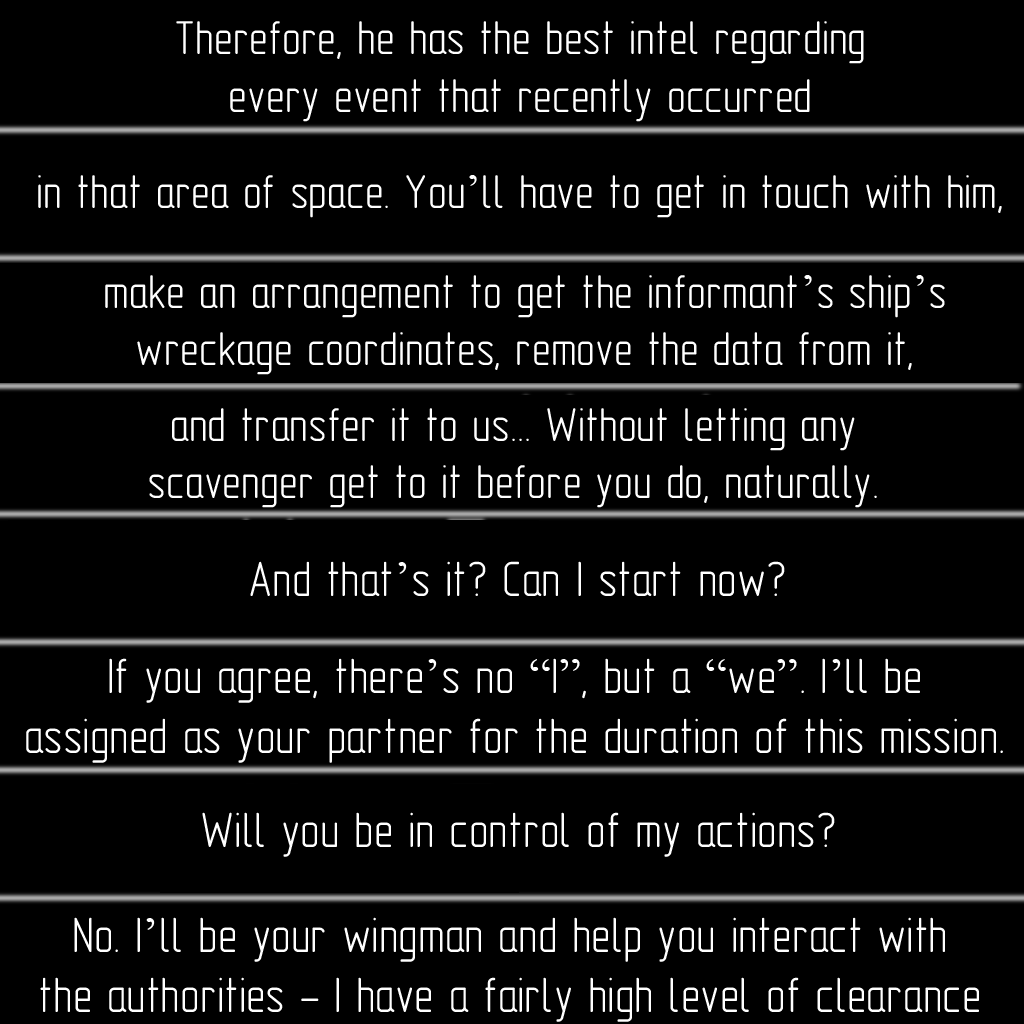
<style>
.page{position:relative;width:1024px;height:1024px;background:#000000}
.page>*{position:absolute;margin:0}
.t1{font:48px "GOST-2.304-81typeA";color:#ffffff}
.t2{font:48px "TimesNewRomanPSMT";color:#ffffff}
.t3{font:50px "GOST-2.304-81typeA";color:#ffffff}
.t4{font:50px "TimesNewRomanPSMT";color:#ffffff}
</style>
<div class="page">
<p class="t1" style="left:176px;top:21px;width:688px;height:101px;text-align:center">Therefore, he has the best intel regarding<br>every event that recently occurred</p>
<p class="t1" style="left:38px;top:175px;width:964px;height:43px">in that area of space. You<span class="t2">’</span>ll have to get in touch with him,</p>
<p class="t1" style="left:105px;top:275px;width:840px;height:100px;text-align:center">make an arrangement to get the informant<span class="t2">’</span>s ship<span class="t2">’</span>s<br>wreckage coordinates, remove the data from it,</p>
<p class="t1" style="left:149px;top:408px;width:728px;height:100px;text-align:center">and transfer it to us... Without letting any<br>scavenger get to it before you do, naturally.</p>
<p class="t3" style="left:250px;top:561px;width:535px;height:35px">And that<span class="t4">’</span>s it? Can I start now?</p>
<p class="t3" style="left:26px;top:658px;width:977px;height:105px;text-align:center">If you agree, there<span class="t4">’</span>s no <span class="t4">“</span>I<span class="t4">”</span>, but a <span class="t4">“</span>we<span class="t4">”</span>. I<span class="t4">’</span>ll be<br>assigned as your partner for the duration of this mission.</p>
<p class="t3" style="left:202px;top:812px;width:633px;height:45px">Will you be in control of my actions?</p>
<p class="t3" style="left:40px;top:917px;width:939px;height:105px;text-align:center">No. I<span class="t4">’</span>ll be your wingman and help you interact with<br>the authorities - I have a fairly high level of clearance</p>
</div>
